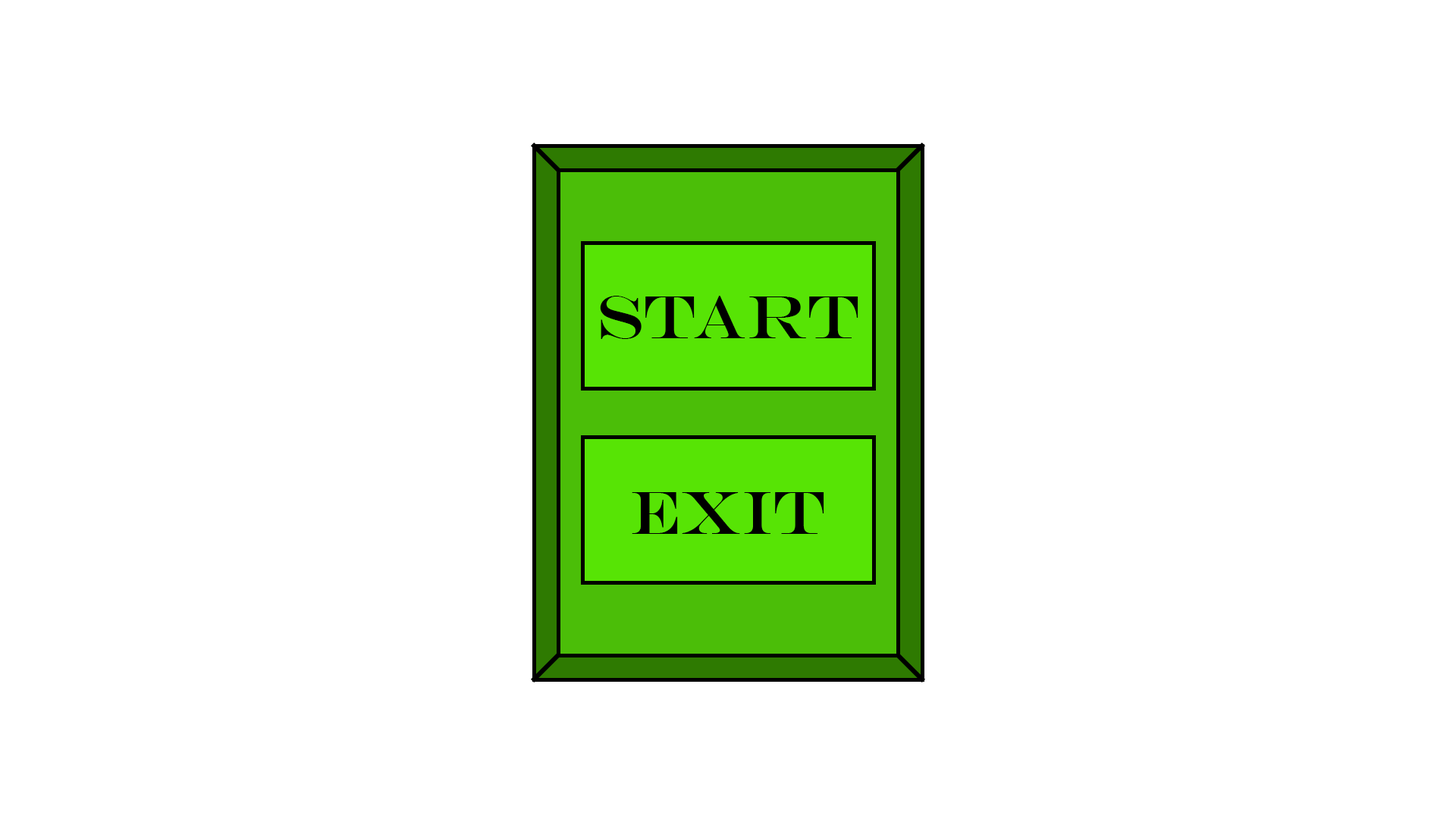
<style>
.page{position:relative;width:1456px;height:819px;background:#ffffff}
.page>*{position:absolute;margin:0}
.t1{font:60.7px "EngraversMT";color:#000000}
</style>
<div class="page">
<p class="t1" style="left:600px;top:296px;width:258px;height:43px">START</p>
<p class="t1" style="left:632px;top:492px;width:192px;height:42px">EXIT</p>
</div>
